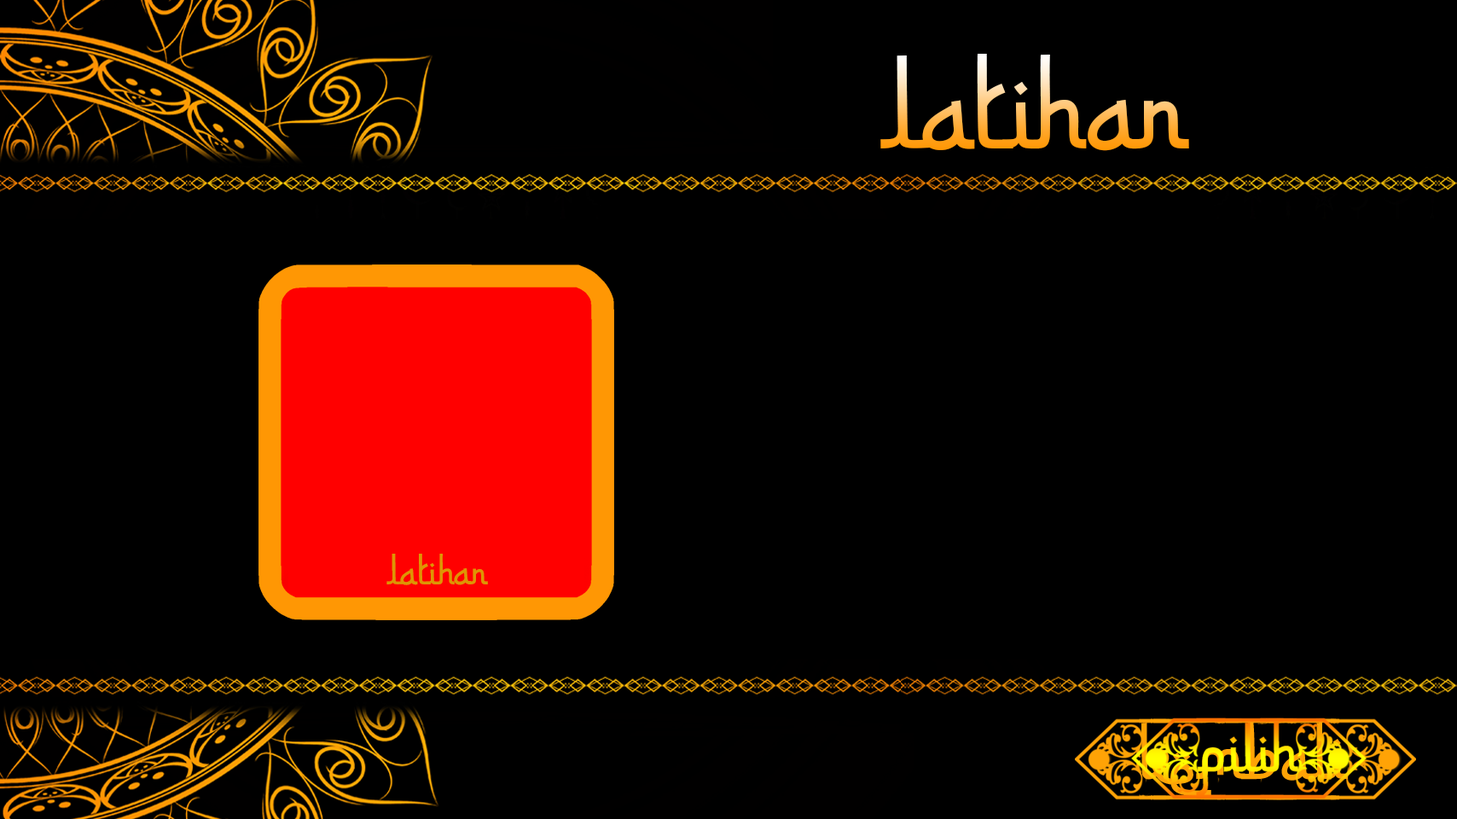
<style>
.page{position:relative;width:1457px;height:819px;background:#000000}
.page>*{position:absolute;margin:0}
.t1{font:93.8px "SitiMaesaroh"}
</style>
<div class="page">
<p class="t1" style="left:880px;top:54px;width:309px;height:97px">latihan</p>
</div>
